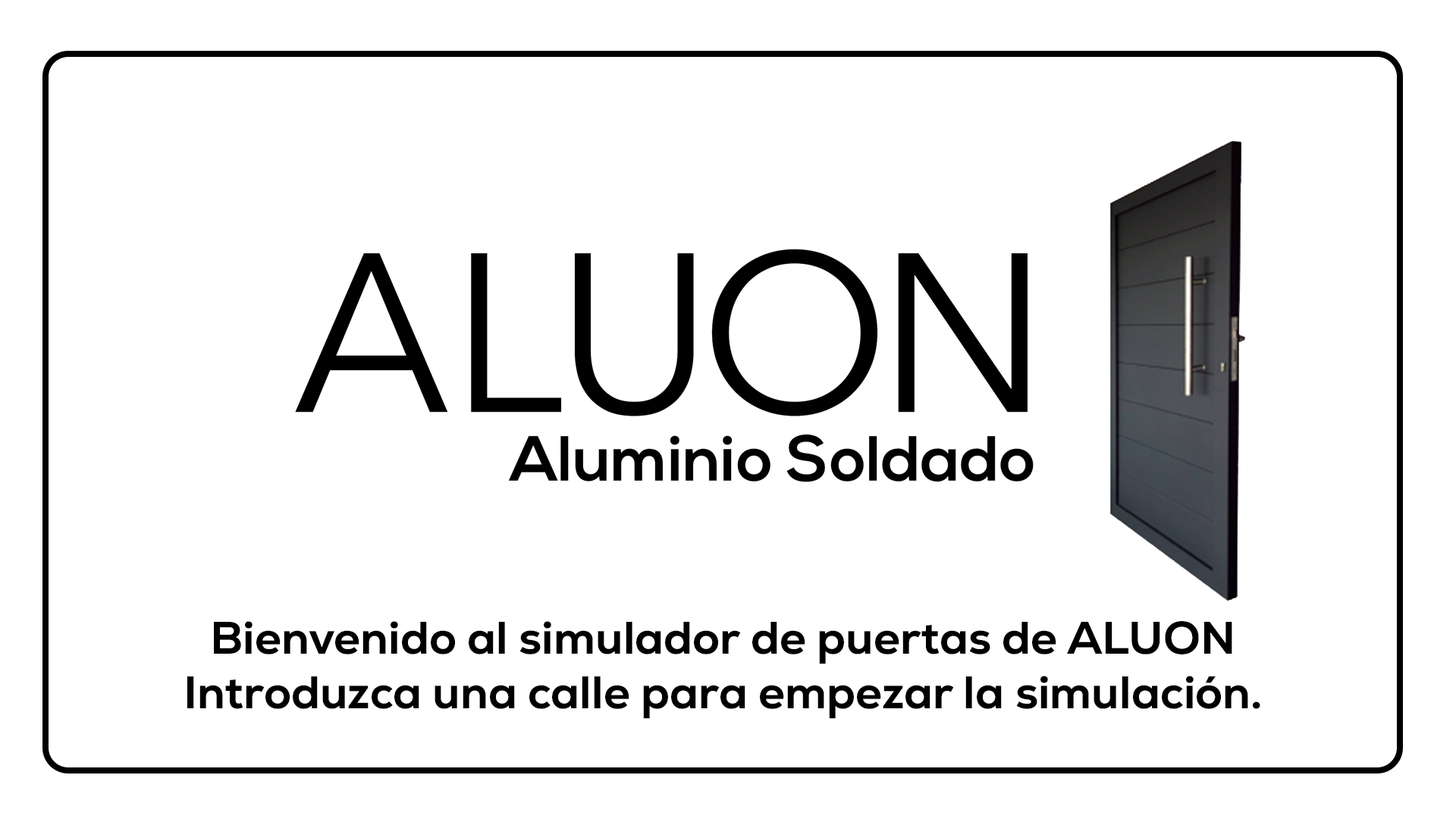
<style>
.page{position:relative;width:1456px;height:819px;background:#ffffff}
.page>*{position:absolute;margin:0}
.t1{font:45.5px "Nexa-ExtraBold";color:#000000}
</style>
<div class="page">
<p class="t1" style="left:187px;top:621px;width:1073px;height:98px;text-align:center">Bienvenido al simulador de puertas de ALUON <br>Introduzca una calle para empezar la simulación.</p>
</div>
